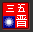
<style>
.page{position:relative;width:33px;height:32px;background:#f20000}
.page>*{position:absolute;margin:0}
.t1{font:10.4px "SimSun";color:#ffffff}
.t2{font:11.7px "SimSun";color:#ffffff}
</style>
<div class="page">
<p class="t1" style="left:6px;top:4px;width:19px;height:8px">三五</p>
<p class="t2" style="left:16px;top:15px;width:11px;height:12px">晋</p>
</div>
